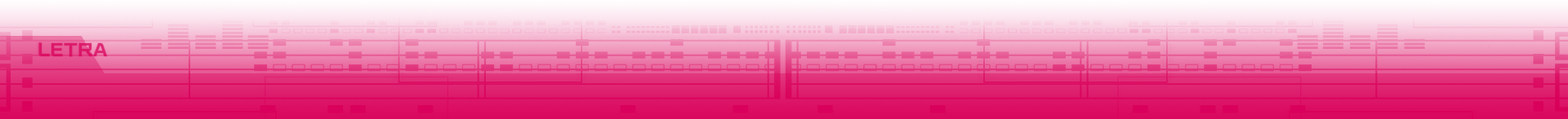
<style>
.page{position:relative;width:1568px;height:119px}
.page>*{position:absolute;margin:0}
.t1{font:15.2px "KafuTechnoStd-U";letter-spacing:0.05em;color:#dc1769}
</style>
<div class="page">
<p class="t1" style="left:38px;top:42px;width:69px;height:15px">LETRA</p>
</div>
